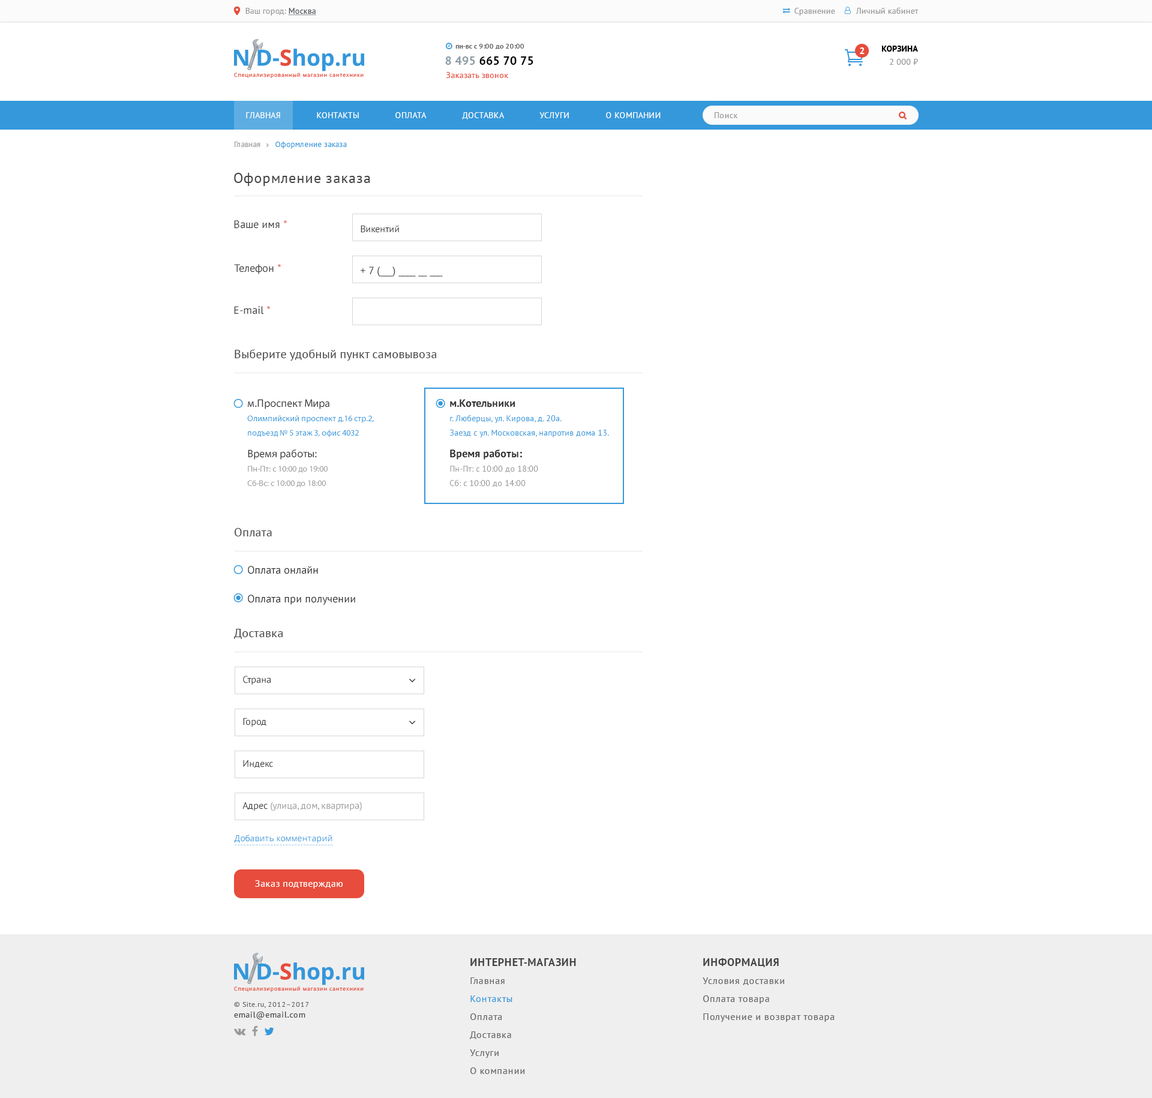
<style>
.page{position:relative;width:1152px;height:1098px;background:#ffffff}
.page>*{position:absolute;margin:0}
.t1{font:8.4px "PTSans-Regular";color:#999999}
.t2{font:8.4px "PTSans-Regular";color:#4c5458;text-decoration:underline}
.t3{font:7.2px "PTSans-Bold";letter-spacing:0.01em;color:#666666}
.t4{font:9.6px "PTSans-Bold";letter-spacing:0.05em;color:#ffffff}
.t5{font:8.4px "PTSans-Bold";letter-spacing:0.025em;color:#000000}
.t6{font:12px "PTSans-Bold";letter-spacing:0.025em;color:#000000}
.t7{font:12px "PTSans-Bold";letter-spacing:0.025em;color:#8d9ca5}
.t8{font:8.4px "PTSans-Regular";letter-spacing:0.01em;color:#e74c3c}
.t9{font:8.4px "PTSans-Regular";letter-spacing:0.025em;color:#ffffff;text-transform:uppercase}
.t10{font:8.4px "PTSans-Regular";letter-spacing:0.025em;color:#999999}
.t11{font:14.4px "PTSans-Regular";letter-spacing:0.05em;color:#444444}
.t12{font:10.8px "PTSans-Regular";color:#444444}
.t13{font:10.8px "PTSans-Regular";color:#e74c3c}
.t14{font:9.6px "PTSans-Regular";color:#333333}
.t15{font:12px "PTSans-Regular";letter-spacing:0.01em;color:#444444}
.t16{font:8.4px/14.4px "MyriadPro-Regular";color:#3498db}
.t17{font:10.8px/14.4px "MyriadPro-Regular";color:#333333}
.t18{font:10.8px/21.6px "MyriadPro-Regular";color:#333333}
.t19{font:8.4px/14.4px "MyriadPro-Regular";color:#999999}
.t20{font:8.4px/14.4px "PTSans-Regular";color:#3498db}
.t21{font:10.8px/14.4px "PTSans-Bold";color:#333333}
.t22{font:10.8px/21.6px "PTSans-Bold";color:#333333}
.t23{font:8.4px/14.4px "PTSans-Regular";color:#999999}
.t24{font:10.8px/14.4px "PTSans-Regular";color:#333333}
.t25{font:9.6px "PTSans-Regular";color:#999999}
.t26{font:8.4px "OpenSans";color:#3498db}
.t27{font:8.4px "OpenSans"}
.t28{font:9.6px "PTSans-Regular";letter-spacing:0.025em;color:#ffffff}
.t29{font:9.6px/18px "PTSans-Regular";letter-spacing:0.05em;color:#666666}
.t30{font:10.8px/18px "PTSans-Bold";letter-spacing:0.05em;color:#444444;text-transform:uppercase}
.t31{font:9.6px/18px "PTSans-Regular";letter-spacing:0.05em;color:#3498db}
.t32{font:7.2px/18px "PTSans-Regular";letter-spacing:0.05em;color:#666666}
.t33{font:8.4px/10.8px "PTSans-Regular";letter-spacing:0.05em;color:#444444}
</style>
<div class="page">
<p class="t1" style="left:245px;top:8px;width:71px;height:8px">Ваш город: <span class="t2">Москва</span></p>
<p class="t1" style="left:794px;top:8px;width:41px;height:8px">Сравнение</p>
<p class="t1" style="left:856px;top:7px;width:63px;height:7px">Личный кабинет</p>
<p class="t3" style="left:455px;top:44px;width:69px;height:5px">пн-вс с 9:00 до 20:00</p>
<p class="t4" style="left:860px;top:47px;width:5px;height:7px">2</p>
<p class="t5" style="left:881px;top:46px;width:37px;height:6px">КОРЗИНА</p>
<p class="t6" style="left:445px;top:56px;width:88px;height:9px"><span class="t7">8 495</span> 665 70 75</p>
<p class="t1" style="left:890px;top:59px;width:28px;height:6px">2 000 ₽</p>
<p class="t8" style="left:446px;top:72px;width:62px;height:6px">Заказать звонок</p>
<p class="t9" style="left:246px;top:112px;width:34px;height:6px">Главная</p>
<p class="t9" style="left:317px;top:112px;width:42px;height:6px">Контакты</p>
<p class="t9" style="left:395px;top:112px;width:32px;height:6px">Оплата</p>
<p class="t9" style="left:462px;top:112px;width:43px;height:7px">доставка</p>
<p class="t9" style="left:539px;top:112px;width:30px;height:6px">Услуги</p>
<p class="t9" style="left:606px;top:112px;width:55px;height:6px">О компании</p>
<p class="t10" style="left:715px;top:112px;width:23px;height:6px">Поиск</p>
<p class="t11" style="left:234px;top:173px;width:136px;height:13px">Оформление заказа</p>
<p class="t12" style="left:234px;top:220px;width:53px;height:9px">Ваше имя <span class="t13">*</span></p>
<p class="t14" style="left:361px;top:225px;width:38px;height:8px">Викентий</p>
<p class="t12" style="left:234px;top:264px;width:47px;height:10px">Телефон <span class="t13">*</span></p>
<p class="t12" style="left:361px;top:266px;width:82px;height:11px">+ 7 (___) ____ __ ___</p>
<p class="t12" style="left:234px;top:306px;width:36px;height:8px">E-mail <span class="t13">*</span></p>
<p class="t15" style="left:235px;top:349px;width:202px;height:12px">Выберите удобный пункт самовывоза</p>
<p class="t16" style="left:247px;top:399px;width:127px;height:88px"><span class="t17">м.Проспект Мира<br></span>Олимпийский проспект д.16 стр.2, <br>подъезд № 5 этаж 3, офис 4032 <br><span class="t18">Время работы:<br></span><span class="t19">Пн-Пт: с 10:00 до 19:00<br>Сб-Вс: с 10:00 до 18:00</span></p>
<p class="t20" style="left:449px;top:399px;width:160px;height:88px"><span class="t21">м.Котельники<br></span>г. Люберцы, ул. Кирова, д. 20а. <br>Заезд с ул. Московская, напротив дома 13.<br><span class="t22">Время работы:<br></span><span class="t23">Пн-Пт: с 10:00 до 18:00<br>Сб: с 10:00 до 14:00</span></p>
<p class="t15" style="left:235px;top:528px;width:37px;height:8px">Оплата</p>
<p class="t24" style="left:248px;top:566px;width:107px;height:39px">Оплата онлайн<br><br>Оплата при получении</p>
<p class="t15" style="left:234px;top:629px;width:49px;height:10px">Доставка</p>
<p class="t14" style="left:243px;top:676px;width:28px;height:9px">Страна</p>
<p class="t14" style="left:243px;top:718px;width:23px;height:9px">Город</p>
<p class="t14" style="left:243px;top:760px;width:30px;height:8px">Индекс</p>
<p class="t25" style="left:242px;top:802px;width:120px;height:9px"><span class="t14">Адрес </span>(улица, дом, квартира)</p>
<p class="t26" style="left:234px;top:835px;width:98px;height:9px">Добавить комментарий</p>
<p class="t27" style="left:235px;top:844px;width:98px;height:1px">---------------------------------</p>
<p class="t28" style="left:255px;top:880px;width:88px;height:9px">Заказ подтверждаю</p>
<p class="t29" style="left:470px;top:958px;width:106px;height:116px"><span class="t30">Интернет-магазин<br></span>Главная<br><span class="t31">Контакты<br></span>Оплата<br>Доставка<br>Услуги<br>О компании</p>
<p class="t29" style="left:703px;top:958px;width:132px;height:64px"><span class="t30">Информация<br></span>Условия доставки<br>Оплата товара<br>Получение и возврат товара</p>
<p class="t32" style="left:234px;top:1002px;width:75px;height:17px">© Site.ru, 2012–2017<br><span class="t33">email@email.com</span></p>
</div>
